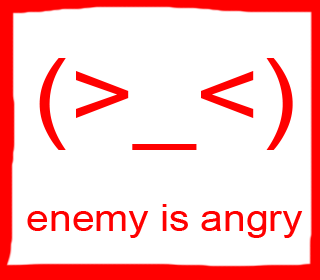
<style>
.page{position:relative;width:320px;height:280px;background:#ffffff}
.page>*{position:absolute;margin:0}
.t1{font:100px "ArialMT";color:#ff0000;scale:1.1 1}
.t2{font:37px "ArialMT";color:#ff0000;scale:1.1 1}
</style>
<div class="page">
<p class="t1" style="left:39px;top:58px;width:254px;height:92px">(&gt;_&lt;)</p>
<p class="t2" style="left:27px;top:204px;width:276px;height:34px">enemy is angry</p>
</div>
